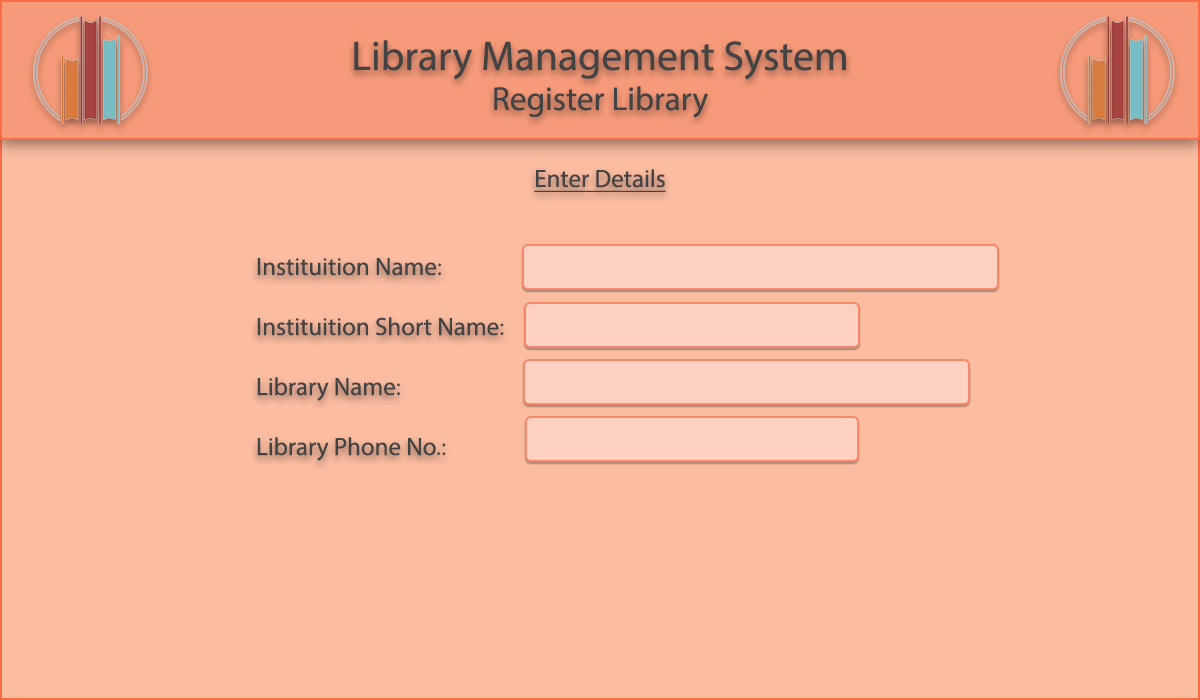
<style>
.page{position:relative;width:1200px;height:700px;background:#fbbca0}
.page>*{position:absolute;margin:0}
.t1{font:41.7px "MyriadPro-Regular";color:#444343}
.t2{font:33.3px "MyriadPro-Regular";color:#444343}
.t3{font:25px "MyriadPro-Regular";color:#444343;text-decoration:underline}
.t4{font:25px "MyriadPro-Regular";color:#444343}
</style>
<div class="page">
<p class="t1" style="left:354px;top:40px;width:492px;height:78px;text-align:center">Library Management System<br><span class="t2">Register Library</span></p>
<p class="t3" style="left:534px;top:169px;width:132px;height:23px">Enter Details</p>
<p class="t4" style="left:257px;top:258px;width:247px;height:203px">Instituition Name: <br><br>Instituition Short Name: <br><br>Library Name: <br><br>Library Phone No.:</p>
</div>
